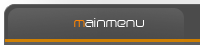
<style>
.page{position:relative;width:200px;height:45px}
.page>*{position:absolute;margin:0}
.t1{font:12px "Birdman";color:#ffffff}
.t2{font:12px "Birdman";color:#ff8400}
</style>
<div class="page">
<p class="t1" style="left:74px;top:18px;width:70px;height:9px"><span class="t2">m</span>ainmenu</p>
</div>
